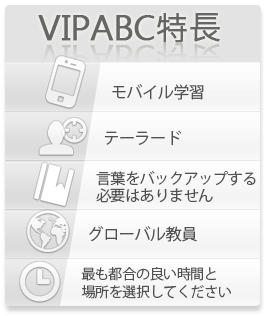
<style>
.page{position:relative;width:268px;height:316px}
.page>*{position:absolute;margin:0}
.t1{font:33px "MicrosoftJhengHeiRegular";letter-spacing:-0.025em;color:#666666;font-weight:bold}
.t2{font:16px "KozGoPr6N-Regular";letter-spacing:-0.025em;color:#515151}
.t3{font:15px/17px "KozGoPr6N-Regular";letter-spacing:-0.025em;color:#515151}
.t4{font:14px/18px "KozGoPr6N-Regular";letter-spacing:-0.025em;color:#515151}
</style>
<div class="page">
<p class="t1" style="left:38px;top:13px;width:182px;height:30px">VIPABC特長</p>
<p class="t2" style="left:112px;top:84px;width:92px;height:16px">モバイル学習</p>
<p class="t2" style="left:104px;top:130px;width:78px;height:16px">テーラード</p>
<p class="t3" style="left:96px;top:171px;width:160px;height:32px">言葉をバックアップする<br>必要はありません</p>
<p class="t2" style="left:89px;top:226px;width:108px;height:16px">グローバル教員</p>
<p class="t4" style="left:81px;top:267px;width:150px;height:32px">最も都合の良い時間と<br>場所を選択してください</p>
</div>
